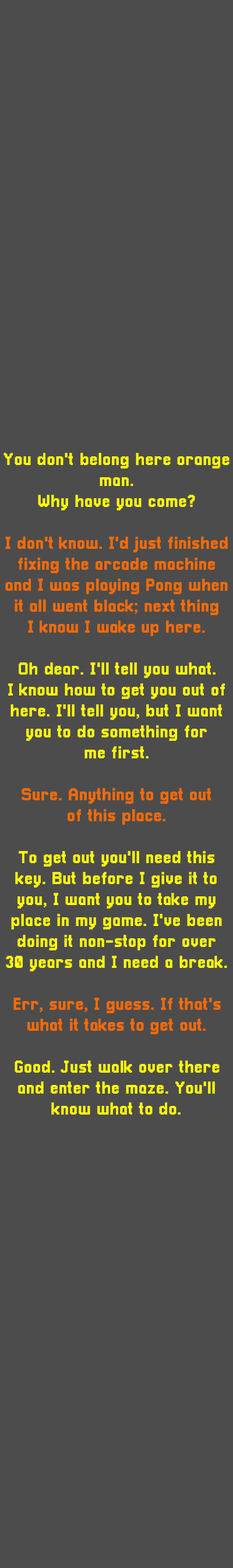
<style>
.page{position:relative;width:233px;height:1568px;background:#4c4c4c}
.page>*{position:absolute;margin:0}
.t1{font:17.5px "Pixellari";color:#ffff00}
.t2{font:17.5px "Pixellari";color:#ff6a00}
</style>
<div class="page">
<p class="t1" style="left:3px;top:453px;width:226px;height:662px;text-align:center">You don't belong here orange<br>man.<br>Why have you come?<br><br><span class="t2">I don't know. I'd just finished<br>fixing the arcade machine<br>and I was playing Pong when<br>it all went black; next thing<br>I know I wake up here.<br><br></span>Oh dear. I'll tell you what.<br>I know how to get you out of<br>here. I'll tell you, but I want<br>you to do something for<br>me first.<br><br><span class="t2">Sure. Anything to get out<br>of this place.<br><br></span>To get out you'll need this<br>key. But before I give it to<br>you, I want you to take my<br>place in my game. I've been<br>doing it non-stop for over<br>30 years and I need a break.<br><br><span class="t2">Err, sure, I guess. If that's<br>what it takes to get out.<br><br></span>Good. Just walk over there<br>and enter the maze. You'll<br>know what to do.</p>
</div>
